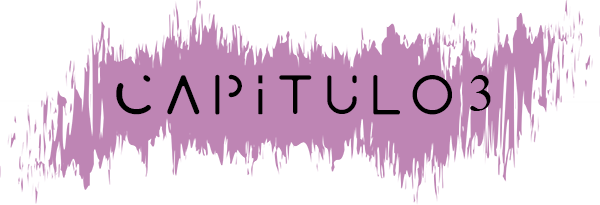
<style>
.page{position:relative;width:600px;height:205px;background:#ffffff}
.page>*{position:absolute;margin:0}
.t1{font:54.2px "Avayx";color:#000000}
.t2{font:54.2px "TimesNewRomanPSMT";color:#000000}
</style>
<div class="page">
<p class="t1" style="left:116px;top:74px;width:375px;height:41px">capitulo<span class="t2"> 3</span></p>
</div>
